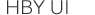
<style>
.page{position:relative;width:95px;height:15px;background:#ffffff}
.page>*{position:absolute;margin:0}
.t1{font:19.2px "Kalinga";color:#333333}
</style>
<div class="page">
<p class="t1" style="left:7px;top:0px;width:61px;height:15px">HBY UI</p>
</div>
